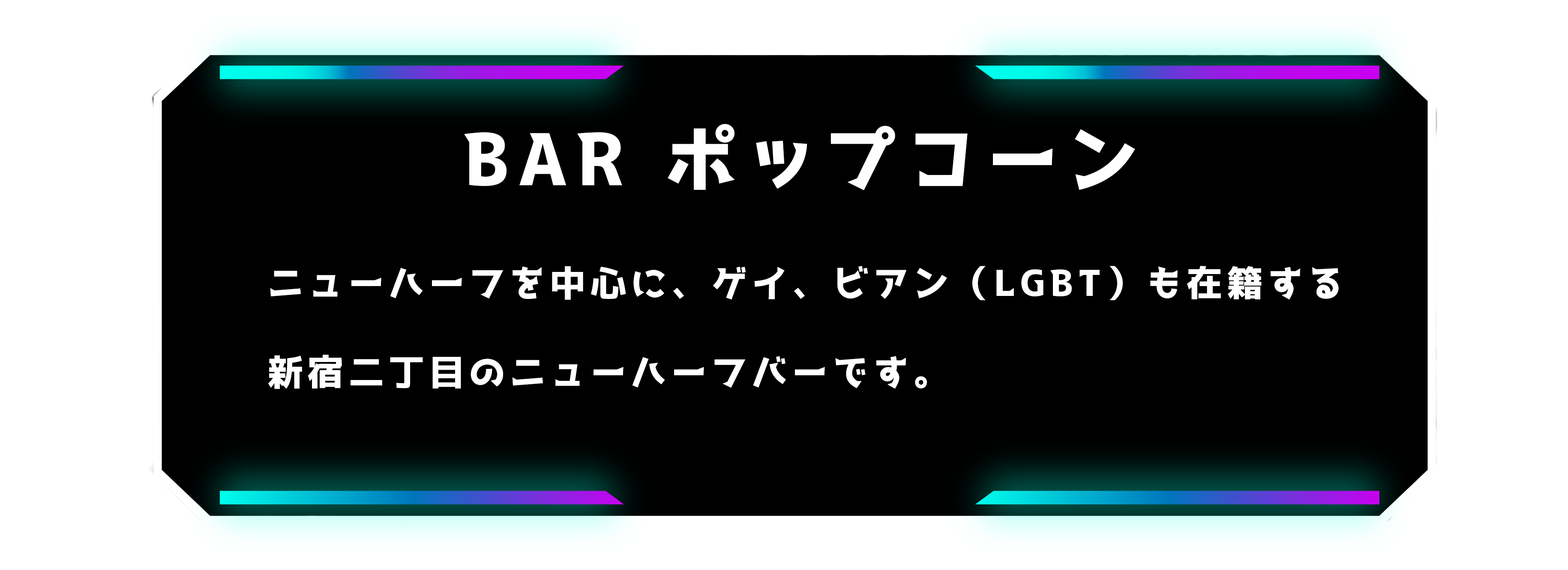
<style>
.page{position:relative;width:1568px;height:570px;background:#000000}
.page>*{position:absolute;margin:0}
.t1{font:71.4px "07AkazukinPop";letter-spacing:0.13em;color:#ffffff}
.t2{font:35.7px/89.3px "07AkazukinPop";letter-spacing:0.13em;color:#ffffff}
</style>
<div class="page">
<p class="t1" style="left:464px;top:124px;width:671px;height:66px">BAR ポップコーン</p>
<p class="t2" style="left:268px;top:266px;width:1071px;height:123px">ニューハーフを中心に、ゲイ、ビアン（LGBT）も在籍する<br>新宿二丁目のニューハーフバーです。</p>
</div>
